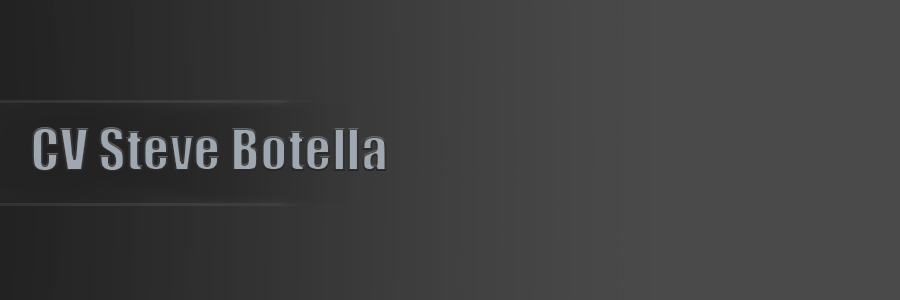
<style>
.page{position:relative;width:900px;height:300px;background:#4a4a4a}
.page>*{position:absolute;margin:0}
.t1{font:53.9px "Impact"}
</style>
<div class="page">
<p class="t1" style="left:31px;top:127px;width:356px;height:45px">CV Steve Botella</p>
</div>
